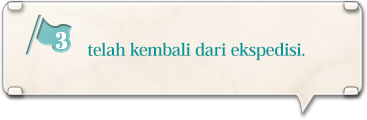
<style>
.page{position:relative;width:367px;height:120px}
.page>*{position:absolute;margin:0}
.t1{font:18px "HeiseiMinStd-W7";letter-spacing:-0.02em;color:#009798}
</style>
<div class="page">
<p class="t1" style="left:87px;top:42px;width:218px;height:19px">telah kembali dari ekspedisi.</p>
</div>
